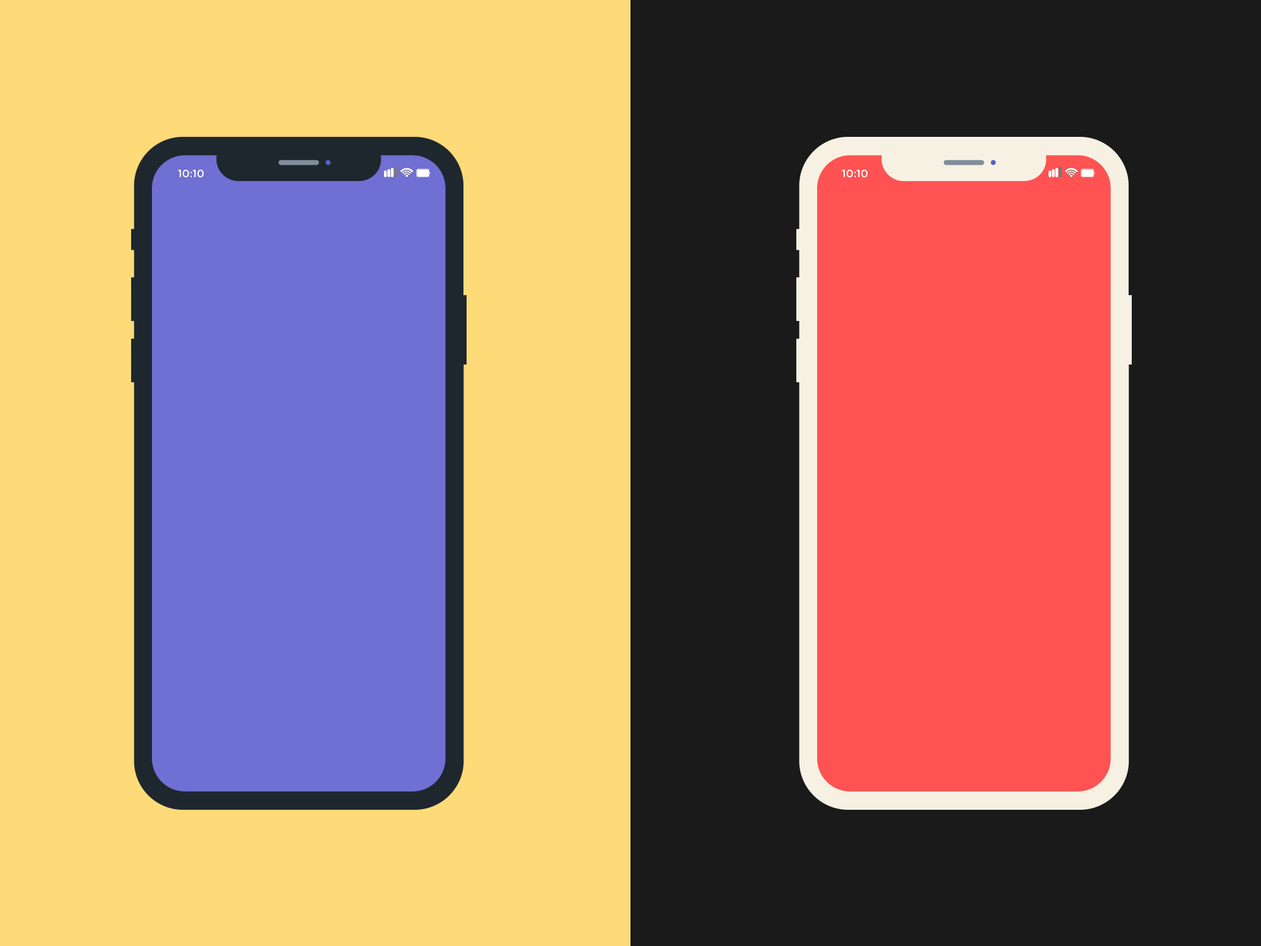
<style>
.page{position:relative;width:1261px;height:946px;background:#feda79}
.page>*{position:absolute;margin:0}
.t1{font:10.5px "GothamRounded-Medium";color:#ffffff}
</style>
<div class="page">
<p class="t1" style="left:178px;top:170px;width:26px;height:8px">10:10</p>
<p class="t1" style="left:842px;top:170px;width:26px;height:8px">10:10</p>
</div>
